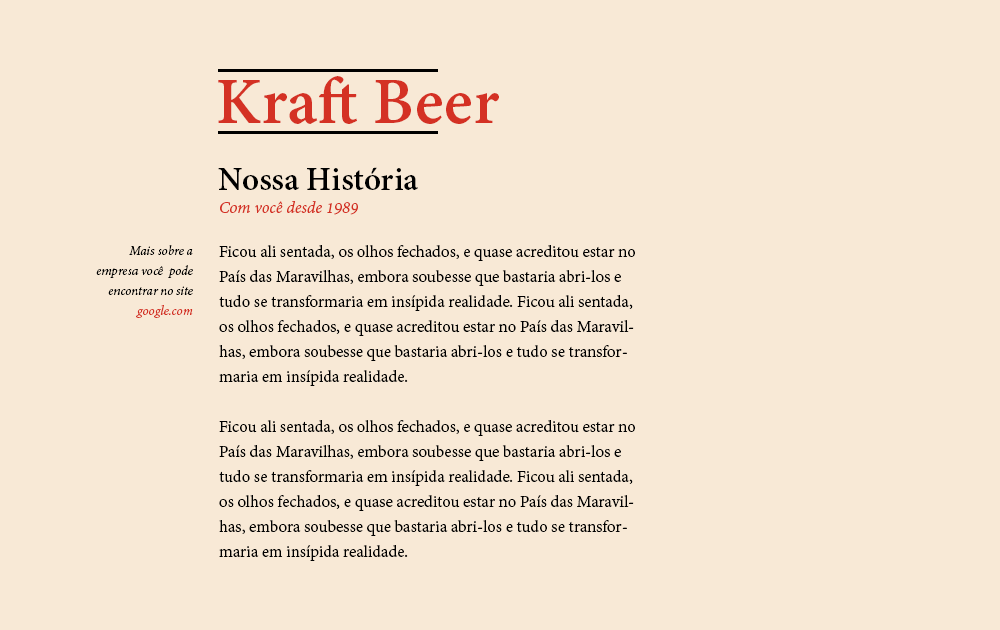
<style>
.page{position:relative;width:1000px;height:630px;background:#f8e9d6}
.page>*{position:absolute;margin:0}
.t1{font:72px "AdobeDevanagari-Bold";color:#d43124}
.t2{font:36px "AdobeDevanagari-Bold";color:#000000}
.t3{font:18px "AdobeDevanagari-Italic";color:#d43124}
.t4{font:14px/20px "AdobeDevanagari-Italic";color:#000000}
.t5{font:14px/20px "AdobeDevanagari-Italic";color:#d43124}
.t6{font:18px/25px "AdobeDevanagari-Regular";color:#000000}
</style>
<div class="page">
<p class="t1" style="left:218px;top:76px;width:281px;height:48px">Kraft Beer</p>
<p class="t2" style="left:218px;top:167px;width:200px;height:23px">Nossa História</p>
<p class="t3" style="left:220px;top:201px;width:138px;height:14px">Com você desde 1989</p>
<p class="t4" style="left:96px;top:245px;width:97px;height:73px;text-align:right">Mais sobre a<br>empresa você  pode<br>encontrar no site<br><span class="t5">google.com</span></p>
<p class="t6" style="left:219px;top:245px;width:416px;height:316px">Ficou ali sentada, os olhos fechados, e quase acreditou estar no País das Maravilhas, embora soubesse que bastaria abri-los e tudo se transformaria em insípida realidade. Ficou ali sentada, os olhos fechados, e quase acreditou estar no País das Maravilhas, embora soubesse que bastaria abri-los e tudo se transformaria em insípida realidade.<br><br>Ficou ali sentada, os olhos fechados, e quase acreditou estar no País das Maravilhas, embora soubesse que bastaria abri-los e tudo se transformaria em insípida realidade. Ficou ali sentada, os olhos fechados, e quase acreditou estar no País das Maravilhas, embora soubesse que bastaria abri-los e tudo se transformaria em insípida realidade.</p>
</div>
